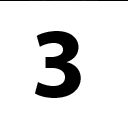
<style>
.page{position:relative;width:128px;height:128px;background:#ffffff}
.page>*{position:absolute;margin:0}
.t1{font:100px "MyriadHebrew-Bold";color:#000000}
</style>
<div class="page">
<p class="t1" style="left:35px;top:30px;width:46px;height:67px">3</p>
</div>
